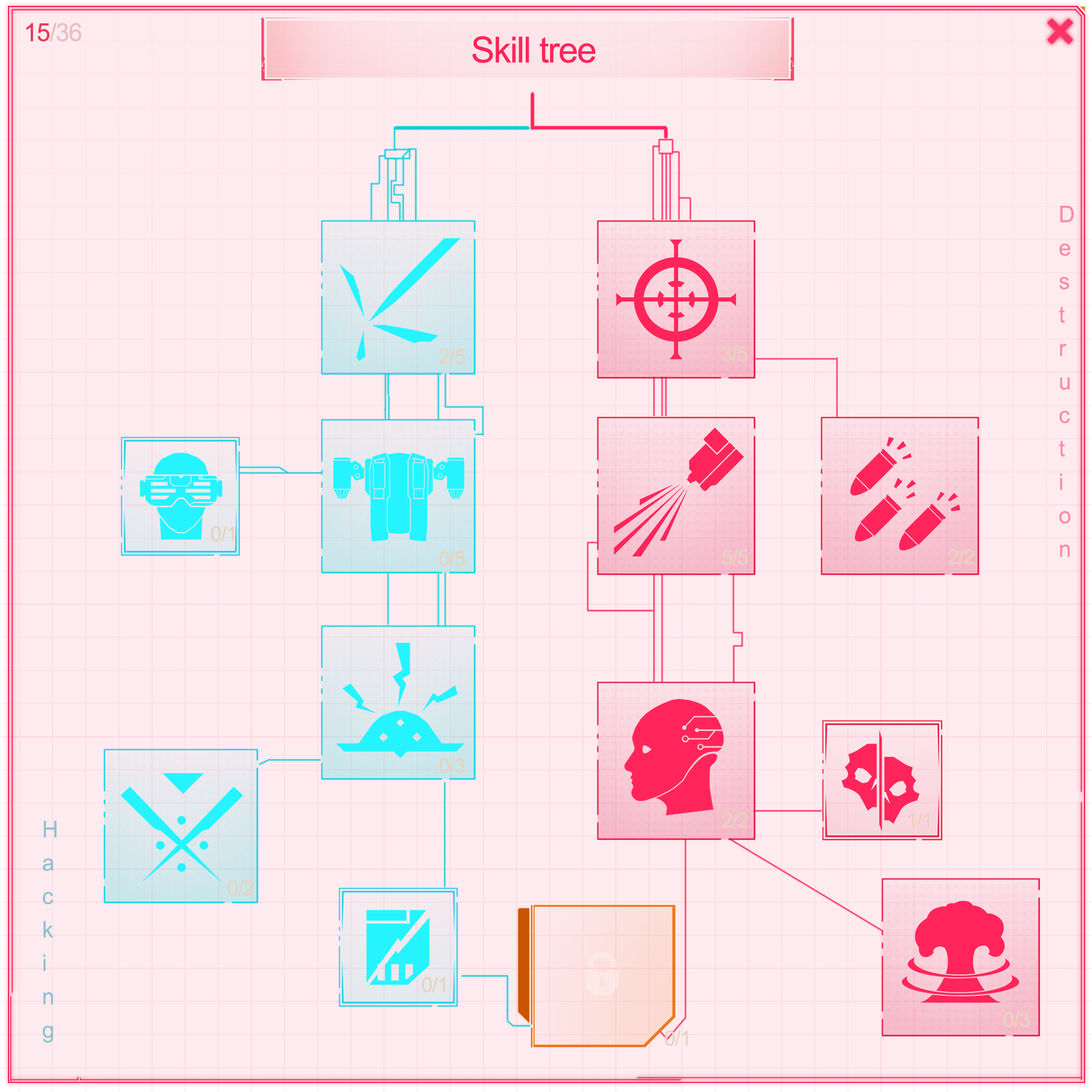
<style>
.page{position:relative;width:1092px;height:1092px;background:#fdebf0}
.page>*{position:absolute;margin:0}
.t1{font:25px "ArialNarrow";letter-spacing:-0.025em;color:#e7bdc4;scale:1.2 1}
.t2{font:25px "ArialNarrow";letter-spacing:-0.025em;color:#e83956;scale:1.2 1}
.t3{font:35.9px "ArialNarrow";letter-spacing:-0.025em;color:#ff255a;scale:1.2 1}
.t4{font:22.8px/33.5px "ArialNarrow";letter-spacing:-0.025em;color:#fe8ba7;scale:1.2 1}
.t5{font:20.9px "ArialNarrow";letter-spacing:-0.025em;color:#e7d2bd;scale:1.2 1}
.t6{font:22.8px/33.5px "ArialNarrow";letter-spacing:-0.025em;color:#8fc3cb;scale:1.2 1}
</style>
<div class="page">
<p class="t1" style="left:26px;top:23px;width:56px;height:19px"><span class="t2">15</span>/36</p>
<p class="t3" style="left:472px;top:36px;width:123px;height:27px">Skill tree</p>
<p class="t4" style="left:1059px;top:206px;width:15px;height:351px">D<br>e<br>s<br>t<br>r<br>u<br>c<br>t<br>i<br>o<br>n</p>
<p class="t5" style="left:439px;top:348px;width:26px;height:17px">2/5</p>
<p class="t5" style="left:722px;top:345px;width:26px;height:17px">3/5</p>
<p class="t5" style="left:211px;top:526px;width:23px;height:16px">0/1</p>
<p class="t5" style="left:439px;top:551px;width:26px;height:16px">0/5</p>
<p class="t5" style="left:722px;top:549px;width:26px;height:16px">5/5</p>
<p class="t5" style="left:948px;top:549px;width:26px;height:16px">2/2</p>
<p class="t5" style="left:439px;top:758px;width:26px;height:16px">0/3</p>
<p class="t6" style="left:42px;top:821px;width:15px;height:222px">H<br>a<br>c<br>k<br>i<br>n<br>g</p>
<p class="t5" style="left:722px;top:812px;width:26px;height:16px">2/2</p>
<p class="t5" style="left:908px;top:812px;width:22px;height:16px">1/1</p>
<p class="t5" style="left:228px;top:880px;width:26px;height:16px">0/2</p>
<p class="t5" style="left:422px;top:977px;width:23px;height:16px">0/1</p>
<p class="t5" style="left:1004px;top:1011px;width:26px;height:17px">0/3</p>
<p class="t5" style="left:665px;top:1030px;width:23px;height:16px">0/1</p>
</div>
